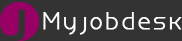
<style>
.page{position:relative;width:182px;height:41px;background:#333333}
.page>*{position:absolute;margin:0}
.t1{font:24px "KolnMesseDeutz";letter-spacing:0.14em;color:#ffffff;font-weight:bold}
</style>
<div class="page">
<p class="t1" style="left:43px;top:12px;width:139px;height:23px">Myjobdesk</p>
</div>
